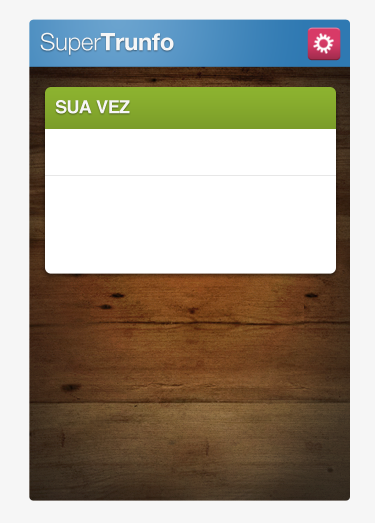
<style>
.page{position:relative;width:375px;height:523px;background:#f6f6f6}
.page>*{position:absolute;margin:0}
.t1{font:24px "HelveticaNeue-Bold";letter-spacing:-0.01em;color:#f6f6f6}
.t2{font:24px "HelveticaNeue-Light";letter-spacing:-0.01em;color:#f6f6f6}
.t3{font:18px "Helvetica-Bold";letter-spacing:-0.025em;color:#f6f6f6;text-transform:uppercase}
</style>
<div class="page">
<p class="t1" style="left:40px;top:32px;width:134px;height:23px"><span class="t2">Super</span>Trunfo</p>
<p class="t3" style="left:55px;top:100px;width:75px;height:14px">Sua vez</p>
</div>
